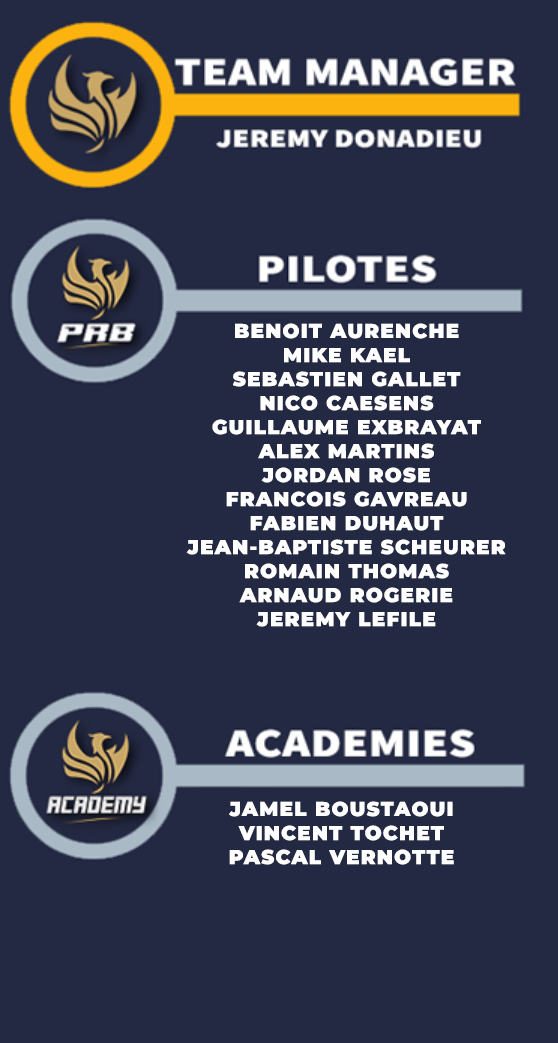
<style>
.page{position:relative;width:558px;height:1043px;background:#242943}
.page>*{position:absolute;margin:0}
.t1{font:20px "Montserrat-Black";letter-spacing:0.06em;color:#ffffff}
</style>
<div class="page">
<p class="t1" style="left:186px;top:323px;width:320px;height:304px;text-align:center">BENOIT AURENCHE<br>MIKE KAEL<br>SEBASTIEN GALLET<br>NICO CAESENS<br>GUILLAUME EXBRAYAT<br>ALEX MARTINS<br>JORDAN ROSE<br>FRANCOIS GAVREAU<br>FABIEN DUHAUT<br>JEAN-BAPTISTE SCHEURER<br>ROMAIN THOMAS<br>ARNAUD ROGERIE<br>JEREMY LEFILE</p>
<p class="t1" style="left:229px;top:801px;width:225px;height:64px;text-align:center">JAMEL BOUSTAOUI<br>VINCENT TOCHET<br>PASCAL VERNOTTE</p>
</div>
